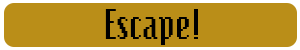
<style>
.page{position:relative;width:300px;height:50px;background:#ba8e18}
.page>*{position:absolute;margin:0}
.t1{font:42px "Bitmap";color:#000000}
</style>
<div class="page">
<p class="t1" style="left:105px;top:9px;width:93px;height:36px">Escape!</p>
</div>
